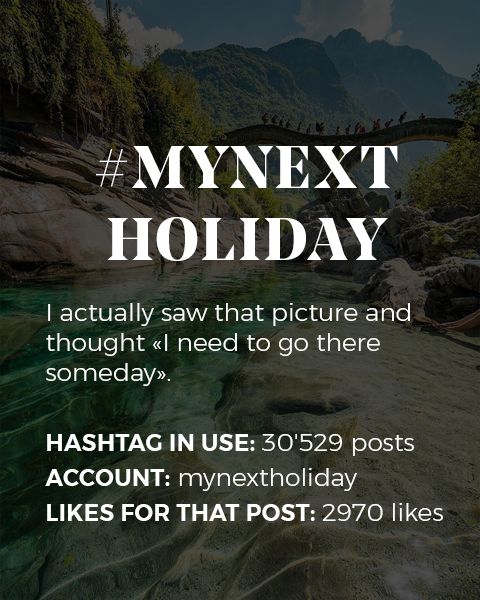
<style>
.page{position:relative;width:480px;height:600px}
.page>*{position:absolute;margin:0}
.t1{font:25px "Montserrat-Light";color:#ffffff}
.t2{font:60px "NoeDisplay-Bold";letter-spacing:0.05em;color:#ffffff;text-transform:uppercase}
.t3{font:23px/35px "Montserrat-SemiBold";letter-spacing:0.02em;color:#ffffff;text-transform:uppercase}
.t4{font:25px/35px "Montserrat-Light";color:#ffffff}
</style>
<div class="page">
<p class="t1" style="left:45px;top:146px;width:398px;height:375px;text-align:center"><span class="t2">#mynext<br>holiday<br><br><br></span>I actually saw that picture and thought «I need to go there <br>someday».<br><br><span class="t3">Hashtag in Use: </span><span class="t4">30'529 posts<br></span><span class="t3">ACCOUNT:</span><span class="t4"> mynextholiday<br></span><span class="t3">Likes for that post: </span><span class="t4">2970 likes</span></p>
</div>
